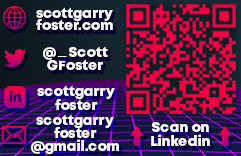
<style>
.page{position:relative;width:241px;height:156px}
.page>*{position:absolute;margin:0}
.t1{font:14px/12px "Mont-HeavyDEMO";color:#ffffff}
.t2{font:14px/13px "Mont-HeavyDEMO";color:#ffffff}
.t3{font:14px "ArialMT";color:#ffffff}
.t4{font:14px/14px "Mont-HeavyDEMO";color:#ffffff}
</style>
<div class="page">
<p class="t1" style="left:36px;top:7px;width:77px;height:23px;text-align:center">scottgarry<br>foster.com</p>
<p class="t2" style="left:43px;top:46px;width:65px;height:25px;text-align:center">@    Scott<br>GFoster</p>
<p class="t3" style="left:57px;top:56px;width:10px;height:1px">_</p>
<p class="t4" style="left:37px;top:85px;width:78px;height:25px;text-align:center">scottgarry<br>foster</p>
<p class="t2" style="left:31px;top:114px;width:88px;height:41px;text-align:center">scottgarry<br>foster<br>@gmail.com</p>
<p class="t4" style="left:151px;top:122px;width:59px;height:24px;text-align:center">Scan on<br>Linkedin</p>
</div>
